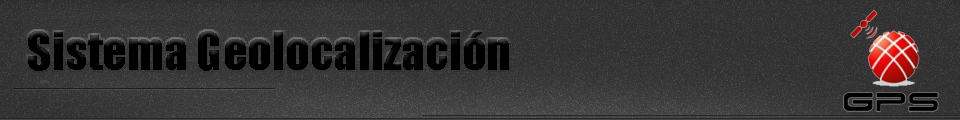
<style>
.page{position:relative;width:960px;height:120px}
.page>*{position:absolute;margin:0}
.t1{font:48px "Impact";color:#000000}
</style>
<div class="page">
<p class="t1" style="left:28px;top:31px;width:481px;height:40px">Sistema Geolocalización</p>
</div>
